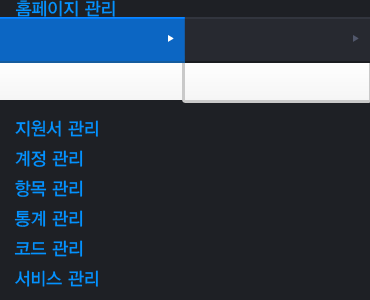
<style>
.page{position:relative;width:370px;height:300px;background:#1e2025}
.page>*{position:absolute;margin:0}
.t1{font:18px "YDIYGO330";color:#0492ff;scale:0.95 1}
</style>
<div class="page">
<p class="t1" style="left:15px;top:0px;width:100px;height:17px">홈페이지 관리</p>
<p class="t1" style="left:15px;top:120px;width:83px;height:17px">지원서 관리</p>
<p class="t1" style="left:15px;top:150px;width:68px;height:17px">계정 관리</p>
<p class="t1" style="left:15px;top:180px;width:68px;height:17px">항목 관리</p>
<p class="t1" style="left:14px;top:210px;width:69px;height:17px">통계 관리</p>
<p class="t1" style="left:14px;top:240px;width:69px;height:17px">코드 관리</p>
<p class="t1" style="left:15px;top:270px;width:83px;height:17px">서비스 관리</p>
</div>
